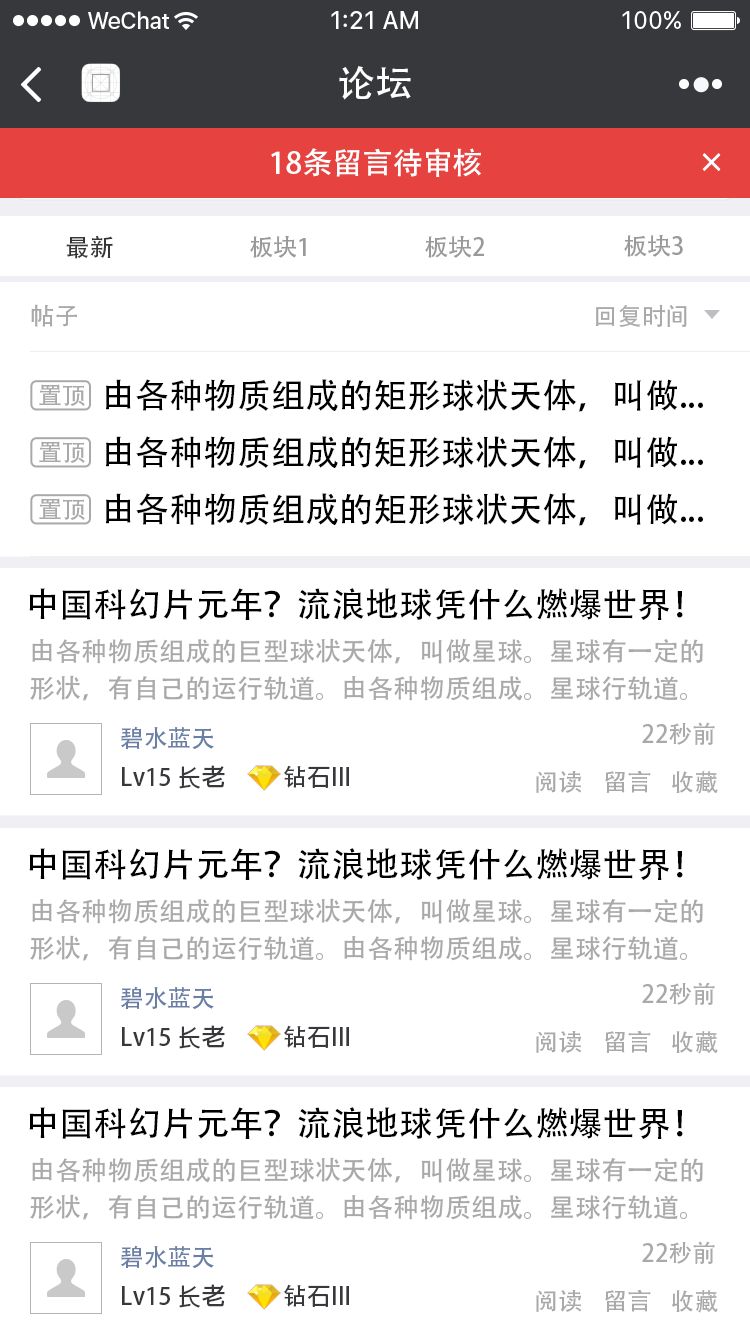
<style>
.page{position:relative;width:750px;height:1334px;background:#ffffff}
.page>*{position:absolute;margin:0}
.t1{font:37px "AdobeHeitiStd-Regular";color:#ffffff}
.t2{font:30px "AdobeHeitiStd-Regular";color:#ffffff}
.t3{font:24px "AdobeHeitiStd-Regular";color:#353535}
.t4{font:24px "AdobeHeitiStd-Regular";color:#999999}
.t5{font:24px "AdobeHeitiStd-Regular";color:#a9a9a9}
.t6{font:34px "AdobeHeitiStd-Regular";color:#000000}
.t7{font:26px/37px "AdobeHeitiStd-Regular";color:#a9a9a9}
.t8{font:24px "AdobeHeitiStd-Regular";color:#6a7fa5}
.t9{font:24px "AdobeHeitiStd-Regular";color:#37383b}
</style>
<div class="page">
<p class="t1" style="left:339px;top:66px;width:72px;height:34px">论坛</p>
<p class="t2" style="left:271px;top:148px;width:210px;height:29px">18条留言待审核</p>
<p class="t3" style="left:66px;top:236px;width:47px;height:23px">最新</p>
<p class="t4" style="left:250px;top:235px;width:56px;height:23px">板块1</p>
<p class="t4" style="left:425px;top:235px;width:59px;height:23px">板块2</p>
<p class="t4" style="left:624px;top:234px;width:59px;height:23px">板块3</p>
<p class="t5" style="left:31px;top:304px;width:46px;height:23px">帖子</p>
<p class="t5" style="left:596px;top:304px;width:91px;height:24px">回复时间</p>
<p class="t5" style="left:39px;top:384px;width:46px;height:22px">置顶</p>
<p class="t6" style="left:106px;top:379px;width:597px;height:33px">由各种物质组成的矩形球状天体，叫做...</p>
<p class="t6" style="left:106px;top:436px;width:597px;height:33px">由各种物质组成的矩形球状天体，叫做...</p>
<p class="t5" style="left:39px;top:441px;width:46px;height:22px">置顶</p>
<p class="t6" style="left:106px;top:493px;width:597px;height:33px">由各种物质组成的矩形球状天体，叫做...</p>
<p class="t5" style="left:39px;top:498px;width:46px;height:22px">置顶</p>
<p class="t6" style="left:29px;top:588px;width:654px;height:32px">中国科幻片元年？流浪地球凭什么燃爆世界！</p>
<p class="t7" style="left:30px;top:638px;width:673px;height:63px">由各种物质组成的巨型球状天体，叫做星球。星球有一定的形状，有自己的运行轨道。由各种物质组成。星球行轨道。</p>
<p class="t8" style="left:121px;top:726px;width:93px;height:23px">碧水蓝天</p>
<p class="t5" style="left:642px;top:722px;width:73px;height:23px">22秒前</p>
<p class="t9" style="left:122px;top:765px;width:103px;height:24px">Lv15 长老</p>
<p class="t9" style="left:284px;top:765px;width:65px;height:23px">钻石III</p>
<p class="t5" style="left:536px;top:771px;width:46px;height:22px">阅读</p>
<p class="t5" style="left:605px;top:770px;width:46px;height:23px">留言</p>
<p class="t5" style="left:672px;top:771px;width:46px;height:23px">收藏</p>
<p class="t6" style="left:29px;top:848px;width:654px;height:32px">中国科幻片元年？流浪地球凭什么燃爆世界！</p>
<p class="t7" style="left:30px;top:898px;width:673px;height:63px">由各种物质组成的巨型球状天体，叫做星球。星球有一定的形状，有自己的运行轨道。由各种物质组成。星球行轨道。</p>
<p class="t8" style="left:121px;top:986px;width:93px;height:23px">碧水蓝天</p>
<p class="t5" style="left:642px;top:982px;width:73px;height:23px">22秒前</p>
<p class="t9" style="left:122px;top:1025px;width:103px;height:24px">Lv15 长老</p>
<p class="t9" style="left:284px;top:1025px;width:65px;height:23px">钻石III</p>
<p class="t5" style="left:536px;top:1031px;width:46px;height:22px">阅读</p>
<p class="t5" style="left:605px;top:1030px;width:46px;height:23px">留言</p>
<p class="t5" style="left:672px;top:1031px;width:46px;height:23px">收藏</p>
<p class="t6" style="left:29px;top:1107px;width:654px;height:32px">中国科幻片元年？流浪地球凭什么燃爆世界！</p>
<p class="t7" style="left:30px;top:1157px;width:673px;height:63px">由各种物质组成的巨型球状天体，叫做星球。星球有一定的形状，有自己的运行轨道。由各种物质组成。星球行轨道。</p>
<p class="t5" style="left:642px;top:1241px;width:73px;height:23px">22秒前</p>
<p class="t8" style="left:121px;top:1245px;width:93px;height:23px">碧水蓝天</p>
<p class="t9" style="left:122px;top:1284px;width:103px;height:24px">Lv15 长老</p>
<p class="t9" style="left:284px;top:1284px;width:65px;height:23px">钻石III</p>
<p class="t5" style="left:605px;top:1289px;width:46px;height:23px">留言</p>
<p class="t5" style="left:536px;top:1290px;width:46px;height:22px">阅读</p>
<p class="t5" style="left:672px;top:1290px;width:46px;height:23px">收藏</p>
</div>
